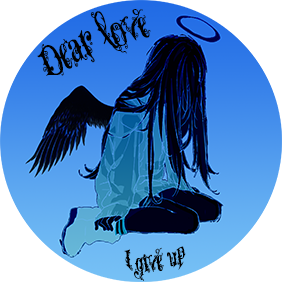
<style>
.page{position:relative;width:283px;height:282px;background:#ffffff}
.page>*{position:absolute;margin:0}
.t1{font:30px "VTKSDearLove";color:#000000}
.t2{font:18px "VTKSDearLove";color:#000000}
</style>
<div class="page">
<p class="t1" style="left:37px;top:9px;width:114px;height:67px;rotate:-23deg">Dear love</p>
<p class="t2" style="left:124px;top:246px;width:62px;height:35px;rotate:-8deg">I give up</p>
</div>
